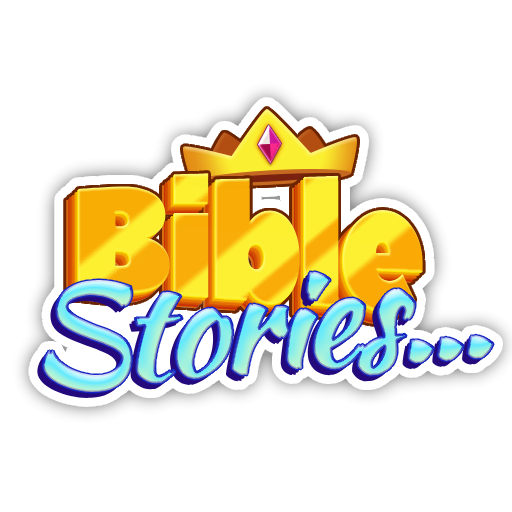
<style>
.page{position:relative;width:512px;height:512px;background:#ffffff}
.page>*{position:absolute;margin:0}
.t1{font:164.3px "PeaceSans";letter-spacing:-0.05em;scale:0.87 1}
.t2{font:136.9px "KaushanScript-Regular";letter-spacing:-0.05em;font-weight:bold}
</style>
<div class="page">
<p class="t1" style="left:78px;top:173px;width:345px;height:141px">Bible</p>
<p class="t2" style="left:43px;top:271px;width:451px;height:123px;rotate:-4deg">Stories...</p>
</div>
